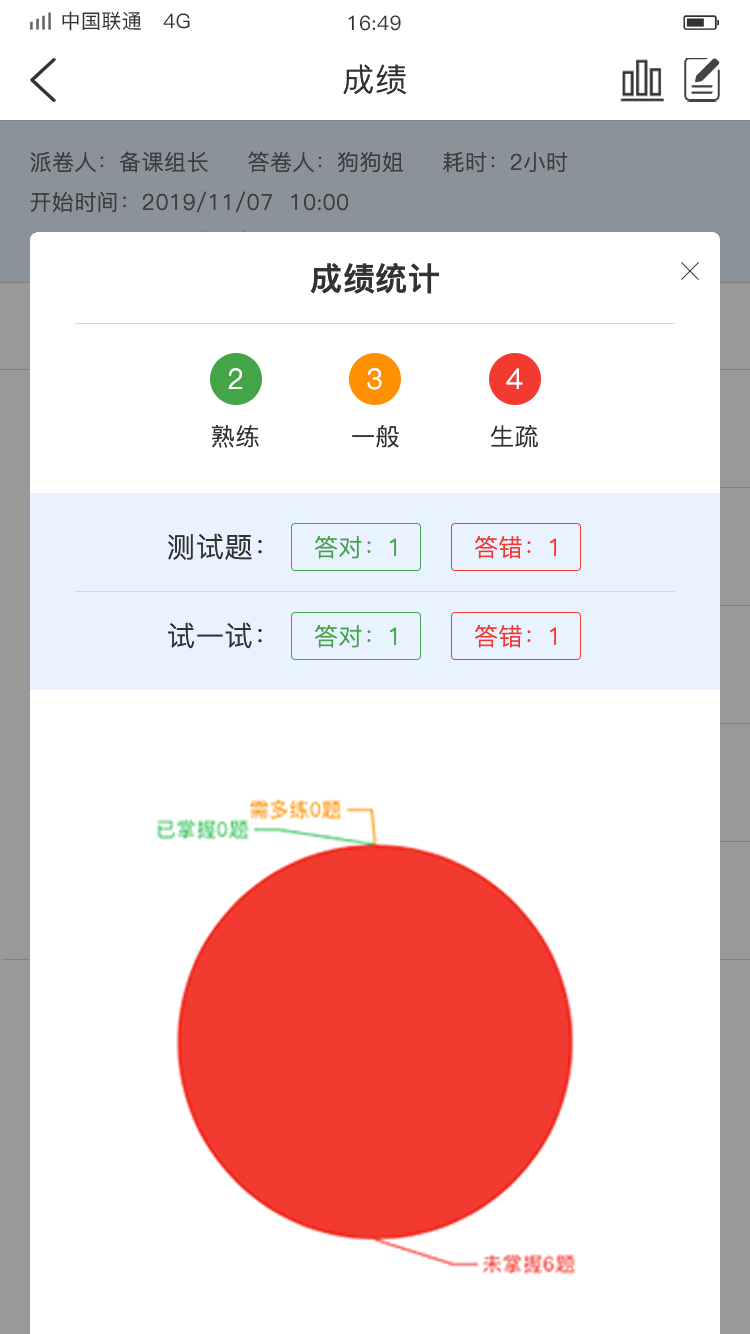
<style>
.page{position:relative;width:750px;height:1334px;background:#ffffff}
.page>*{position:absolute;margin:0}
.t1{font:20px "PingFang-SC-Medium";letter-spacing:0.02em;color:#333333}
.t2{font:32px "PingFang-SC-Regular";letter-spacing:0.02em;color:#333333}
.t3{font:22px "PingFang-SC-Regular";letter-spacing:0.02em;color:#3d3d3d}
.t4{font:32px "PingFang-SC-Bold";letter-spacing:0.02em;color:#333333}
.t5{font:28px "PingFang-SC-Regular";letter-spacing:0.02em;color:#ffffff}
.t6{font:24px "PingFang-SC-Regular";letter-spacing:0.02em;color:#333333}
.t7{font:28px "PingFang-SC-Regular";letter-spacing:0.02em;color:#333333}
.t8{font:24px "PingFang-SC-Regular";letter-spacing:0.02em;color:#43a547}
.t9{font:24px "PingFang-SC-Regular";letter-spacing:0.02em;color:#f23a30}
</style>
<div class="page">
<p class="t1" style="left:62px;top:11px;width:128px;height:20px">中国联通   4G</p>
<p class="t1" style="left:348px;top:15px;width:53px;height:16px">16:49</p>
<p class="t2" style="left:343px;top:64px;width:63px;height:31px">成绩</p>
<p class="t3" style="left:30px;top:151px;width:178px;height:22px">派卷人：备课组长</p>
<p class="t3" style="left:248px;top:151px;width:155px;height:22px">答卷人：狗狗姐</p>
<p class="t3" style="left:443px;top:151px;width:125px;height:22px">耗时：2小时</p>
<p class="t3" style="left:30px;top:191px;width:319px;height:22px">开始时间：2019/11/07  10:00</p>
<p class="t4" style="left:311px;top:263px;width:128px;height:31px">成绩统计</p>
<p class="t5" style="left:228px;top:368px;width:15px;height:21px">2</p>
<p class="t5" style="left:367px;top:368px;width:15px;height:22px">3</p>
<p class="t5" style="left:506px;top:368px;width:17px;height:21px">4</p>
<p class="t6" style="left:211px;top:425px;width:48px;height:23px">熟练</p>
<p class="t6" style="left:352px;top:425px;width:47px;height:23px">一般</p>
<p class="t6" style="left:490px;top:424px;width:48px;height:24px">生疏</p>
<p class="t7" style="left:168px;top:533px;width:94px;height:27px">测试题：</p>
<p class="t8" style="left:315px;top:535px;width:82px;height:24px">答对：1</p>
<p class="t9" style="left:475px;top:535px;width:82px;height:24px">答错：1</p>
<p class="t7" style="left:168px;top:622px;width:94px;height:27px">试一试：</p>
<p class="t8" style="left:315px;top:624px;width:82px;height:24px">答对：1</p>
<p class="t9" style="left:475px;top:624px;width:82px;height:24px">答错：1</p>
</div>
